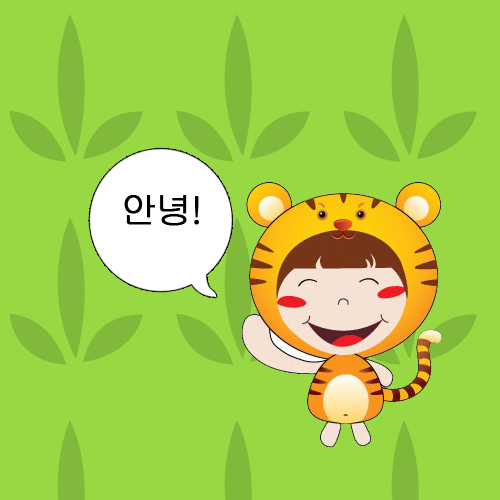
<style>
.page{position:relative;width:500px;height:500px;background:#97d843}
.page>*{position:absolute;margin:0}
.t1{font:37.1px "Gulim";letter-spacing:-0.08em;color:#000000;font-weight:bold}
</style>
<div class="page">
<p class="t1" style="left:124px;top:195px;width:75px;height:31px">안녕!</p>
</div>
